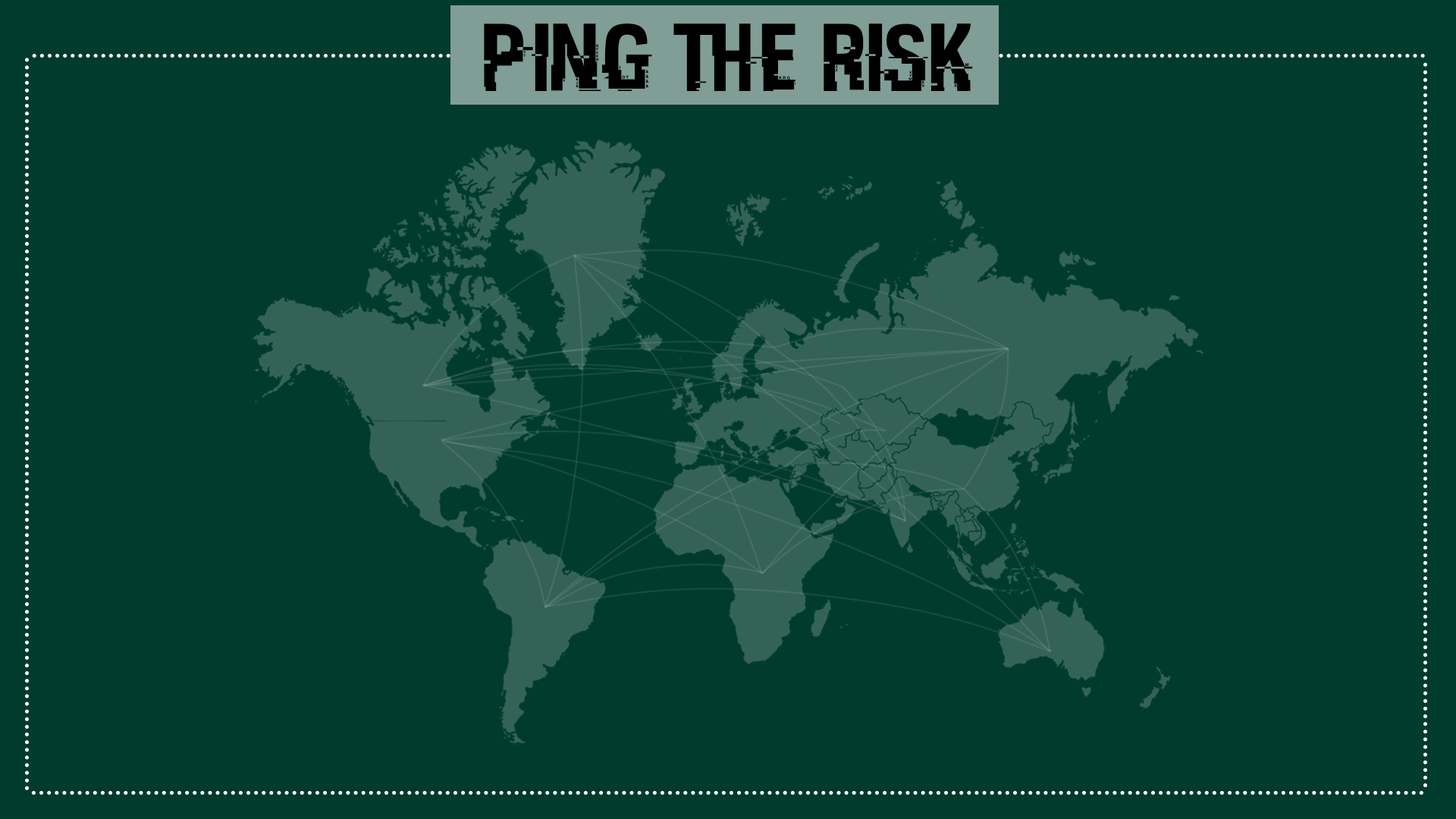
<style>
.page{position:relative;width:1456px;height:819px;background:#013b2d}
.page>*{position:absolute;margin:0}
.t1{font:96.3px "HACKED";color:#000000}
</style>
<div class="page">
<p class="t1" style="left:484px;top:24px;width:489px;height:67px">PING THE RISK</p>
</div>
